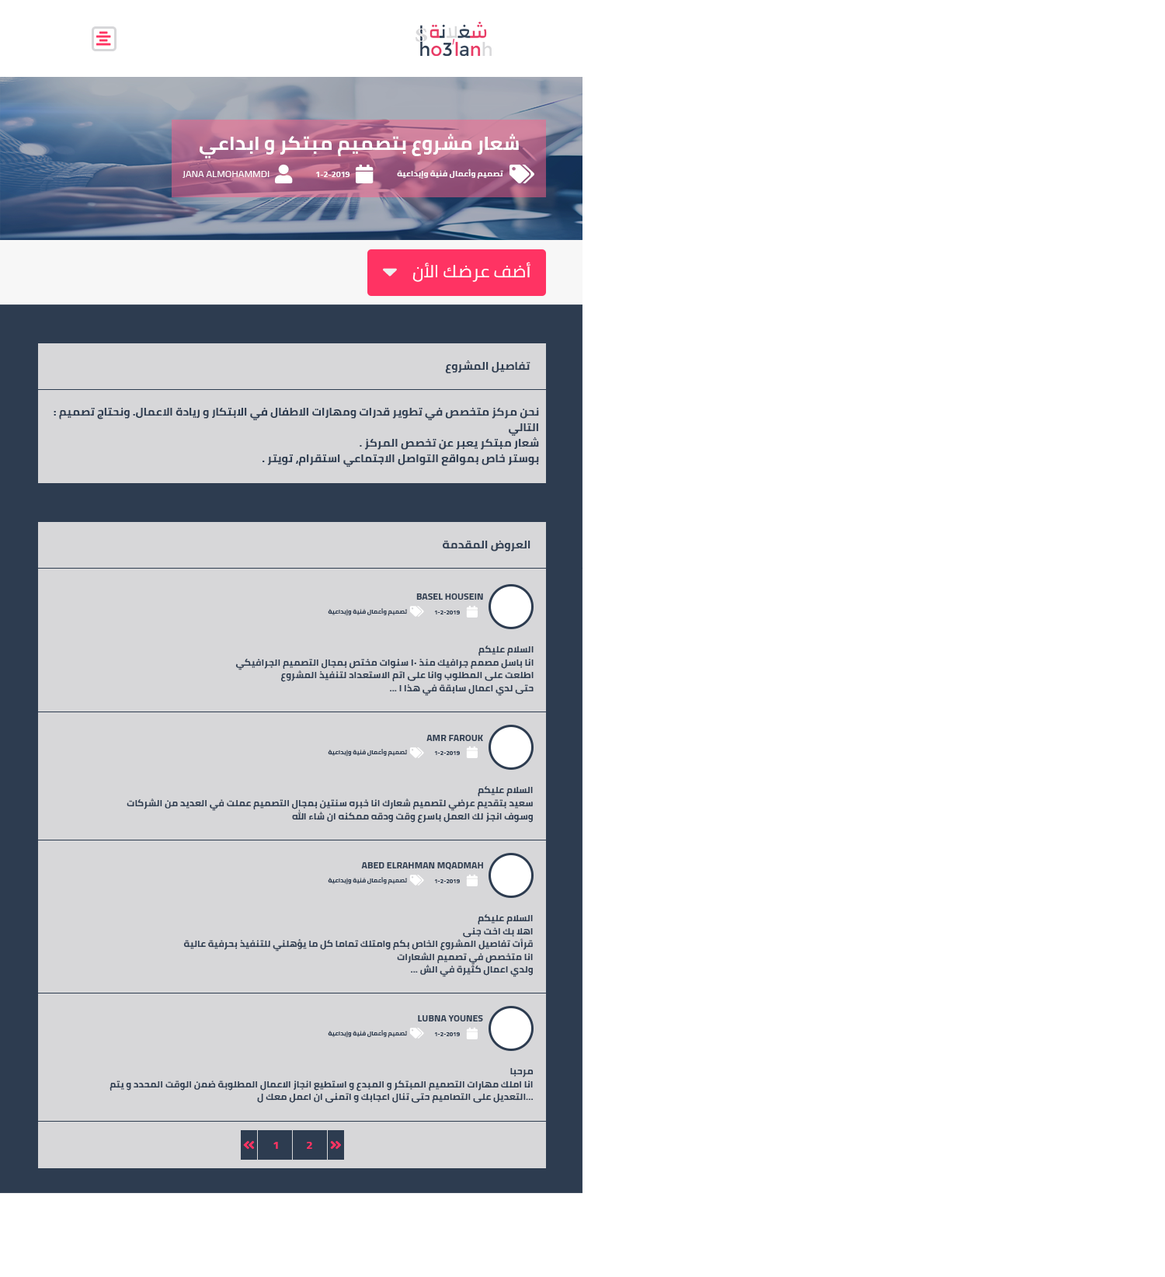
<style>
.page{position:relative;width:1165px;height:1277px;background:#ffffff}
.page>*{position:absolute;margin:0}
.t1{font:18.6px "Cairo-Bold";color:#ffffff;text-transform:uppercase;scale:1.06 1}
.t2{font:9.3px "Cairo";color:#ffffff;text-transform:uppercase;scale:1.06 1}
.t3{font:7.8px "Cairo-Bold";color:#ffffff;text-transform:uppercase;scale:1.06 1}
.t4{font:17.1px "Cairo";color:#ffffff;text-transform:uppercase;scale:1.06 1}
.t5{font:10.9px "Cairo-Bold";color:#2d3c50;text-transform:uppercase;scale:1.06 1}
.t6{font:10.9px/15.5px "Cairo-Bold";color:#2d3c50;scale:1.06 1}
.t7{font:9px "Cairo-Bold";color:#2d3c50;text-transform:uppercase;scale:1.06 1}
.t8{font:5.8px "Cairo-Bold";color:#2d3c50;text-transform:uppercase;scale:1.06 1}
.t9{font:9px/12.9px "Cairo-Bold";color:#2d3c50;scale:1.06 1}
.t10{font:10.9px "Cairo-Bold";color:#ff3363;text-transform:uppercase;scale:1.06 1}
</style>
<div class="page">
<p class="t1" style="left:200px;top:134px;width:319px;height:24px">شعار مشروع بتصميم مبتكر و ابداعي</p>
<p class="t2" style="left:182px;top:171px;width:87px;height:7px">jana Almohammdi</p>
<p class="t3" style="left:316px;top:172px;width:34px;height:5px">1-2-2019</p>
<p class="t3" style="left:397px;top:169px;width:106px;height:10px">تصميم وأعمال فنية وإبداعية</p>
<p class="t4" style="left:412px;top:262px;width:118px;height:20px">أضف عرضك الأن</p>
<p class="t5" style="left:445px;top:360px;width:85px;height:14px">تفاصيل المشروع</p>
<p class="t6" style="left:54px;top:407px;width:485px;height:60px;text-align:right">: نحن مركز متخصص في تطوير قدرات ومهارات الاطفال في الابتكار و ريادة الاعمال. ونحتاج تصميم التالي<br>. شعار مبتكر يعبر عن تخصص المركز<br>. بوستر خاص بمواقع التواصل الاجتماعي استقرام، تويتر<br>. بزنس كارت</p>
<p class="t5" style="left:442px;top:540px;width:88px;height:11px">العروض المقدمة</p>
<p class="t7" style="left:416px;top:593px;width:67px;height:6px">Basel Housein</p>
<p class="t8" style="left:328px;top:608px;width:80px;height:8px">تصميم وأعمال فنية وإبداعية</p>
<p class="t8" style="left:434px;top:610px;width:26px;height:4px">1-2-2019</p>
<p class="t9" style="left:235px;top:645px;width:298px;height:51px;text-align:right">السلام عليكم<br>انا باسل مصمم جرافيك منذ 10 سنوات مختص بمجال التصميم الجرافيكي<br>اطلعت على المطلوب وانا على اتم الاستعداد لتنفيذ المشروع<br> ... حتى لدي اعمال سابقة في هذا ا</p>
<p class="t7" style="left:426px;top:735px;width:57px;height:6px">amr farouk</p>
<p class="t8" style="left:328px;top:749px;width:80px;height:7px">تصميم وأعمال فنية وإبداعية</p>
<p class="t8" style="left:434px;top:751px;width:26px;height:4px">1-2-2019</p>
<p class="t9" style="left:127px;top:786px;width:406px;height:37px;text-align:right">السلام عليكم<br>سعيد بتقديم عرضي لتصميم شعارك انا خبره سنتين بمجال التصميم عملت في العديد من الشركات وسوف انجز لك العمل باسرع وقت ودقه ممكنه ان شاء الله</p>
<p class="t7" style="left:361px;top:862px;width:122px;height:8px">Abed Elrahman Mqadmah</p>
<p class="t8" style="left:328px;top:877px;width:80px;height:7px">تصميم وأعمال فنية وإبداعية</p>
<p class="t8" style="left:434px;top:879px;width:26px;height:4px">1-2-2019</p>
<p class="t9" style="left:183px;top:914px;width:350px;height:63px;text-align:right">السلام عليكم<br>اهلا بك اخت جنى<br>قرأت تفاصيل المشروع الخاص بكم وامتلك تماما كل ما يؤهلني للتنفيذ بحرفية عالية<br>انا متخصص في تصميم الشعارات<br>... ولدي اعمال كثيرة في الش</p>
<p class="t7" style="left:418px;top:1015px;width:65px;height:6px">lubna younes</p>
<p class="t8" style="left:328px;top:1030px;width:80px;height:7px">تصميم وأعمال فنية وإبداعية</p>
<p class="t8" style="left:434px;top:1032px;width:26px;height:4px">1-2-2019</p>
<p class="t9" style="left:109px;top:1068px;width:424px;height:35px;text-align:right">مرحبا<br>انا املك مهارات التصميم المبتكر و المبدع و استطيع انجاز الاعمال المطلوبة ضمن الوقت المحدد و يتم التعديل على التصاميم حتى تنال اعجابك و اتمنى ان اعمل معك ل...</p>
<p class="t10" style="left:273px;top:1142px;width:5px;height:7px">1</p>
<p class="t10" style="left:307px;top:1142px;width:5px;height:7px">2</p>
</div>
